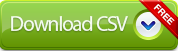
<style>
.page{position:relative;width:178px;height:51px}
.page>*{position:absolute;margin:0}
.t1{font:9px "HelveticaLTStd-Bold";color:#ffffff;text-transform:uppercase}
.t2{font:21px "MyriadPro-Regular";letter-spacing:-0.05em;color:#f3fcee}
</style>
<div class="page">
<p class="t1" style="left:153px;top:4px;width:22px;height:21px;rotate:45deg">FREE</p>
<p class="t2" style="left:11px;top:16px;width:117px;height:15px">Download CSV</p>
</div>
